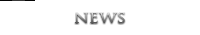
<style>
.page{position:relative;width:200px;height:35px;background:#ffffff}
.page>*{position:absolute;margin:0}
.t1{font:18px "TrajanPro-Regular"}
</style>
<div class="page">
<p class="t1" style="left:74px;top:12px;width:51px;height:11px">news</p>
</div>
